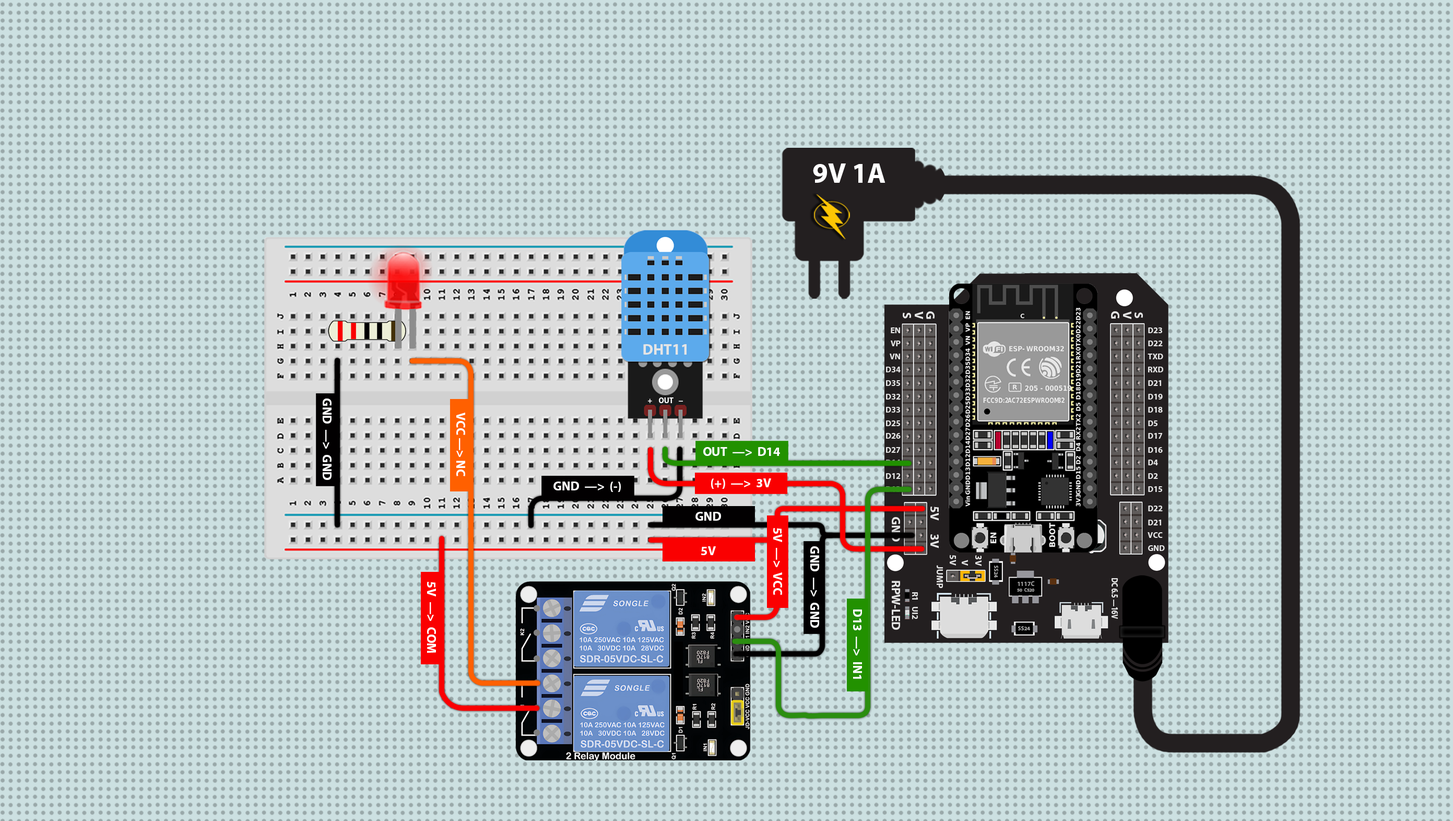
<style>
.page{position:relative;width:1453px;height:821px;background:#cce0e1}
.page>*{position:absolute;margin:0}
.t1{font:28.2px "MyriadPro-Bold";color:#ffffff}
.t2{font:21.2px "MyriadPro-Bold";color:#e5e5e5}
.t3{font:14.4px "MyriadPro-Bold";color:#e5e5e5}
.t4{font:26.6px "MyriadPro-Bold";color:#e5e5e5}
.t5{font:21.6px "MyriadPro-Bold";color:#ffffff}
.t6{font:13.6px "MyriadPro-Bold";color:#ffffff;scale:0.95 1}
.t7{font:13.6px "MyriadPro-Bold";color:#ffffff;scale:2.01 1}
.t8{font:15.6px "MyriadPro-Bold";color:#e5e5e5}
.t9{font:9.6px "MyriadPro-Bold";color:#9f9f9f}
.t10{font:8.3px/6.6px "MyriadPro-Bold";color:#9f9f9f;scale:0.96 1}
.t11{font:11px/6.6px "MyriadPro-Bold";color:#9f9f9f;scale:0.96 1}
.t12{font:15.6px "MyriadPro-Bold";color:#e5e5e5;scale:0.78 1}
</style>
<div class="page">
<p class="t1" style="left:813px;top:163px;width:72px;height:20px">9V 1A</p>
<p class="t2" style="left:903px;top:312px;width:8px;height:6px;rotate:90deg">S</p>
<p class="t2" style="left:915px;top:311px;width:8px;height:8px;rotate:90deg">V</p>
<p class="t2" style="left:926px;top:311px;width:9px;height:8px;rotate:90deg">G</p>
<p class="t2" style="left:1111px;top:311px;width:8px;height:7px;rotate:90deg">G</p>
<p class="t2" style="left:1123px;top:311px;width:8px;height:8px;rotate:90deg">V</p>
<p class="t2" style="left:1134px;top:312px;width:9px;height:6px;rotate:90deg">S</p>
<p class="t3" style="left:891px;top:327px;width:9px;height:6px">EN</p>
<p class="t3" style="left:1148px;top:327px;width:14px;height:6px">D23</p>
<p class="t3" style="left:891px;top:340px;width:10px;height:6px">VP</p>
<p class="t3" style="left:1148px;top:340px;width:15px;height:6px">D22</p>
<p class="t4" style="left:643px;top:344px;width:44px;height:10px">DHT11</p>
<p class="t3" style="left:890px;top:353px;width:10px;height:6px">VN</p>
<p class="t3" style="left:1148px;top:353px;width:15px;height:6px">TXD</p>
<p class="t3" style="left:886px;top:366px;width:15px;height:6px">D34</p>
<p class="t3" style="left:1148px;top:366px;width:15px;height:6px">RXD</p>
<p class="t3" style="left:886px;top:380px;width:14px;height:6px">D35</p>
<p class="t3" style="left:1148px;top:380px;width:13px;height:6px">D21</p>
<p class="t5" style="left:323px;top:398px;width:9px;height:82px;rotate:90deg">GND  —&gt;  GND</p>
<p class="t6" style="left:648px;top:398px;width:4px;height:5px">+</p>
<p class="t6" style="left:659px;top:397px;width:14px;height:6px">OUT</p>
<p class="t7" style="left:679px;top:400px;width:4px;height:1px">-</p>
<p class="t3" style="left:886px;top:394px;width:15px;height:5px">D32</p>
<p class="t3" style="left:1148px;top:394px;width:15px;height:5px">D19</p>
<p class="t5" style="left:456px;top:412px;width:9px;height:64px;rotate:90deg">VCC —&gt; NC</p>
<p class="t3" style="left:886px;top:407px;width:14px;height:5px">D33</p>
<p class="t3" style="left:1148px;top:407px;width:15px;height:5px">D18</p>
<p class="t3" style="left:886px;top:420px;width:14px;height:6px">D25</p>
<p class="t3" style="left:1148px;top:420px;width:9px;height:6px">D5</p>
<p class="t3" style="left:886px;top:433px;width:15px;height:6px">D26</p>
<p class="t3" style="left:1148px;top:433px;width:14px;height:6px">D17</p>
<p class="t5" style="left:703px;top:447px;width:77px;height:9px">OUT  —&gt;  D14</p>
<p class="t3" style="left:886px;top:447px;width:14px;height:6px">D27</p>
<p class="t3" style="left:1148px;top:447px;width:15px;height:6px">D16</p>
<p class="t3" style="left:1148px;top:459px;width:10px;height:6px">D4</p>
<p class="t3" style="left:886px;top:473px;width:15px;height:6px">D12</p>
<p class="t3" style="left:1148px;top:473px;width:10px;height:6px">D2</p>
<p class="t5" style="left:553px;top:481px;width:68px;height:11px">GND  —&gt;  (-)</p>
<p class="t5" style="left:711px;top:478px;width:60px;height:11px">(+)  —&gt;  3V</p>
<p class="t3" style="left:1148px;top:486px;width:14px;height:6px">D15</p>
<p class="t2" style="left:930px;top:506px;width:9px;height:15px;rotate:90deg">5V</p>
<p class="t3" style="left:1148px;top:505px;width:15px;height:6px">D22</p>
<p class="t5" style="left:695px;top:512px;width:26px;height:9px">GND</p>
<p class="t2" style="left:892px;top:517px;width:8px;height:24px;rotate:90deg">GND</p>
<p class="t3" style="left:1148px;top:519px;width:13px;height:6px">D21</p>
<p class="t5" style="left:773px;top:528px;width:9px;height:67px;rotate:90deg">5V  —&gt;  VCC</p>
<p class="t3" style="left:1148px;top:532px;width:15px;height:6px">VCC</p>
<p class="t2" style="left:930px;top:534px;width:9px;height:14px;rotate:90deg">3V</p>
<p class="t3" style="left:1148px;top:545px;width:17px;height:6px">GND</p>
<p class="t5" style="left:701px;top:546px;width:15px;height:9px">5V</p>
<p class="t5" style="left:810px;top:546px;width:9px;height:82px;rotate:90deg">GND  —&gt;  GND</p>
<p class="t8" style="left:950px;top:554px;width:6px;height:11px;rotate:90deg">5V</p>
<p class="t8" style="left:975px;top:555px;width:7px;height:11px;rotate:90deg">3V</p>
<p class="t8" style="left:937px;top:565px;width:6px;height:23px;rotate:90deg">JUMP</p>
<p class="t8" style="left:962px;top:560px;width:6px;height:5px;rotate:90deg">V</p>
<p class="t9" style="left:994px;top:565px;width:4px;height:12px;rotate:90deg">SS24</p>
<p class="t5" style="left:427px;top:582px;width:9px;height:71px;rotate:90deg">5V  —&gt;  COM</p>
<p class="t2" style="left:892px;top:581px;width:8px;height:49px;rotate:90deg">RPW-LED</p>
<p class="t10" style="left:1017px;top:581px;width:18px;height:11px;text-align:center"><span class="t11">1117C<br></span>50  C520</p>
<p class="t12" style="left:1112px;top:578px;width:6px;height:41px;rotate:90deg">DC 6.5 —16V</p>
<p class="t3" style="left:912px;top:592px;width:6px;height:7px;rotate:90deg">R1</p>
<p class="t5" style="left:853px;top:609px;width:9px;height:70px;rotate:90deg">D13  —&gt;  IN1</p>
<p class="t3" style="left:912px;top:607px;width:6px;height:12px;rotate:90deg">UI2</p>
<p class="t9" style="left:1018px;top:626px;width:12px;height:4px">SS24</p>
</div>
